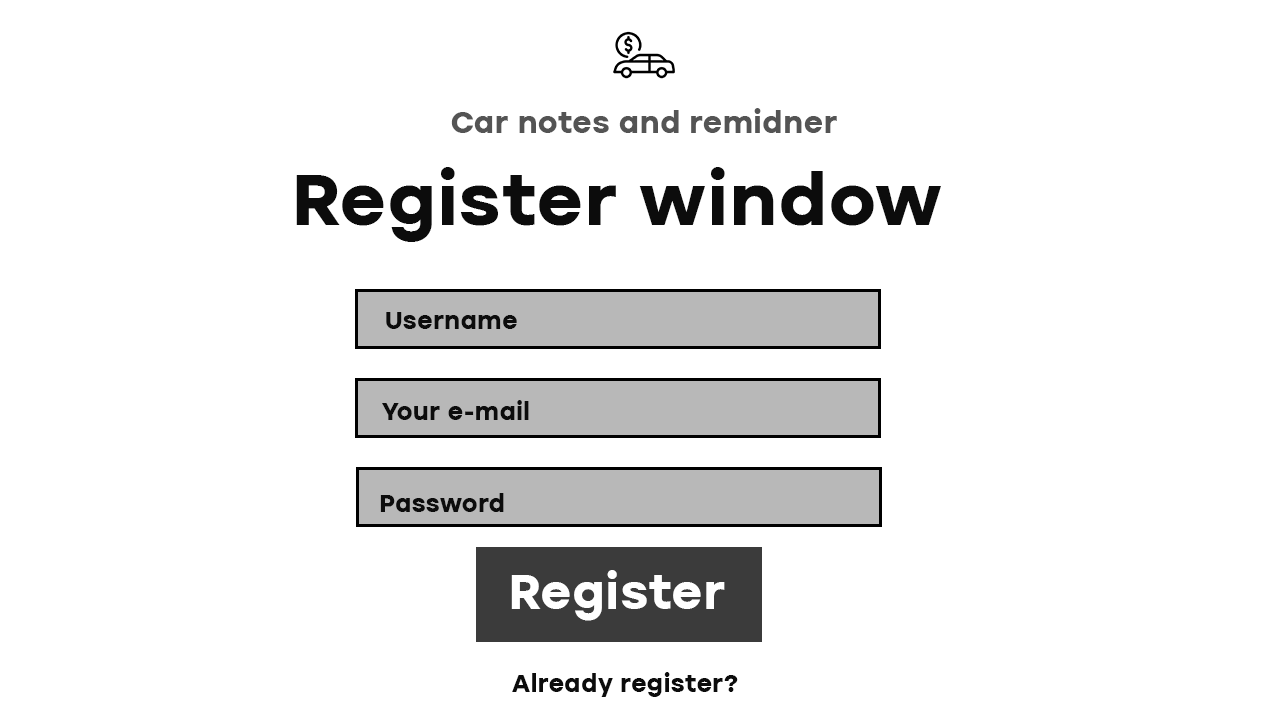
<style>
.page{position:relative;width:1280px;height:720px;background:#ffffff}
.page>*{position:absolute;margin:0}
.t1{font:30px "ICTV-Bold";color:#545454}
.t2{font:72px "ICTV-Bold";color:#0c0c0c}
.t3{font:24px "ICTV-Bold";color:#0c0c0c}
.t4{font:48px "ICTV-Bold";color:#ffffff}
</style>
<div class="page">
<p class="t1" style="left:451px;top:108px;width:386px;height:25px">Car notes and remidner</p>
<p class="t2" style="left:296px;top:167px;width:645px;height:75px">Register window</p>
<p class="t3" style="left:386px;top:312px;width:131px;height:17px">Username</p>
<p class="t3" style="left:382px;top:400px;width:147px;height:20px">Your e-mail</p>
<p class="t3" style="left:380px;top:493px;width:124px;height:19px">Password</p>
<p class="t4" style="left:511px;top:570px;width:214px;height:51px">Register</p>
<p class="t3" style="left:512px;top:672px;width:226px;height:25px">Already register?</p>
</div>
